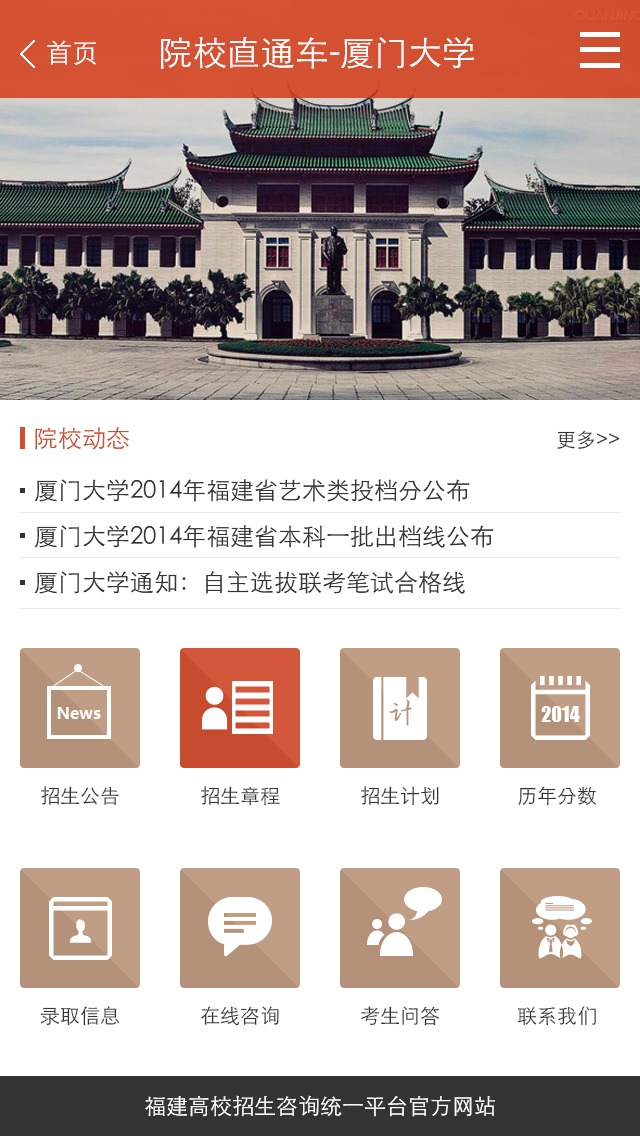
<style>
.page{position:relative;width:640px;height:1136px;background:#ffffff}
.page>*{position:absolute;margin:0}
.t1{font:26px "STHeitiTC-Light";color:#ffffff}
.t2{font:34px "STHeitiTC-Light";color:#ffffff}
.t3{font:24px "STHeitiTC-Light";color:#d04f30}
.t4{font:20px "STHeitiTC-Light";color:#333333}
.t5{font:24px/46px "STHeitiTC-Light";color:#333333}
.t6{font:26px "Ò¶¸ùÓÑ¸Ö±ÊÐÐÊéÉý¼¶°æ";color:#b49179}
.t7{font:16px "MicrosoftYaHei-Bold";color:#ffffff}
.t8{font:20px "Impact";color:#ffffff}
.t9{font:22px "STHeitiTC-Light";color:#ffffff}
</style>
<div class="page">
<p class="t1" style="left:47px;top:40px;width:50px;height:25px">首页</p>
<p class="t2" style="left:160px;top:37px;width:314px;height:32px">院校直通车-厦门大学</p>
<p class="t3" style="left:35px;top:427px;width:95px;height:23px">院校动态</p>
<p class="t4" style="left:557px;top:430px;width:63px;height:19px">更多&gt;&gt;</p>
<p class="t5" style="left:34px;top:479px;width:460px;height:115px">厦门大学2014年福建省艺术类投档分公布<br>厦门大学2014年福建省本科一批出档线公布<br>厦门大学通知：自主选拔联考笔试合格线</p>
<p class="t6" style="left:389px;top:699px;width:23px;height:27px">计</p>
<p class="t7" style="left:57px;top:707px;width:44px;height:12px">News</p>
<p class="t8" style="left:541px;top:706px;width:39px;height:16px">2014</p>
<p class="t4" style="left:41px;top:786px;width:78px;height:19px">招生公告</p>
<p class="t4" style="left:201px;top:786px;width:79px;height:20px">招生章程</p>
<p class="t4" style="left:361px;top:786px;width:78px;height:19px">招生计划</p>
<p class="t4" style="left:518px;top:786px;width:78px;height:20px">历年分数</p>
<p class="t4" style="left:40px;top:1006px;width:80px;height:20px">录取信息</p>
<p class="t4" style="left:200px;top:1006px;width:79px;height:20px">在线咨询</p>
<p class="t4" style="left:361px;top:1006px;width:79px;height:20px">考生问答</p>
<p class="t4" style="left:517px;top:1006px;width:79px;height:20px">联系我们</p>
<p class="t9" style="left:145px;top:1095px;width:350px;height:22px">福建高校招生咨询统一平台官方网站</p>
</div>
